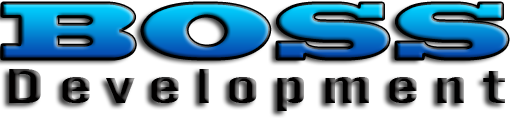
<style>
.page{position:relative;width:512px;height:128px;background:#ffffff}
.page>*{position:absolute;margin:0}
.t1{font:75px "BlackoakStd"}
.t2{font:47.5px "AlternateGothicNo2BT-Regular";letter-spacing:0.14em;scale:2 1}
</style>
<div class="page">
<p class="t1" style="left:1px;top:3px;width:507px;height:56px">BOSS</p>
<p class="t2" style="left:9px;top:69px;width:496px;height:42px">Development</p>
</div>
